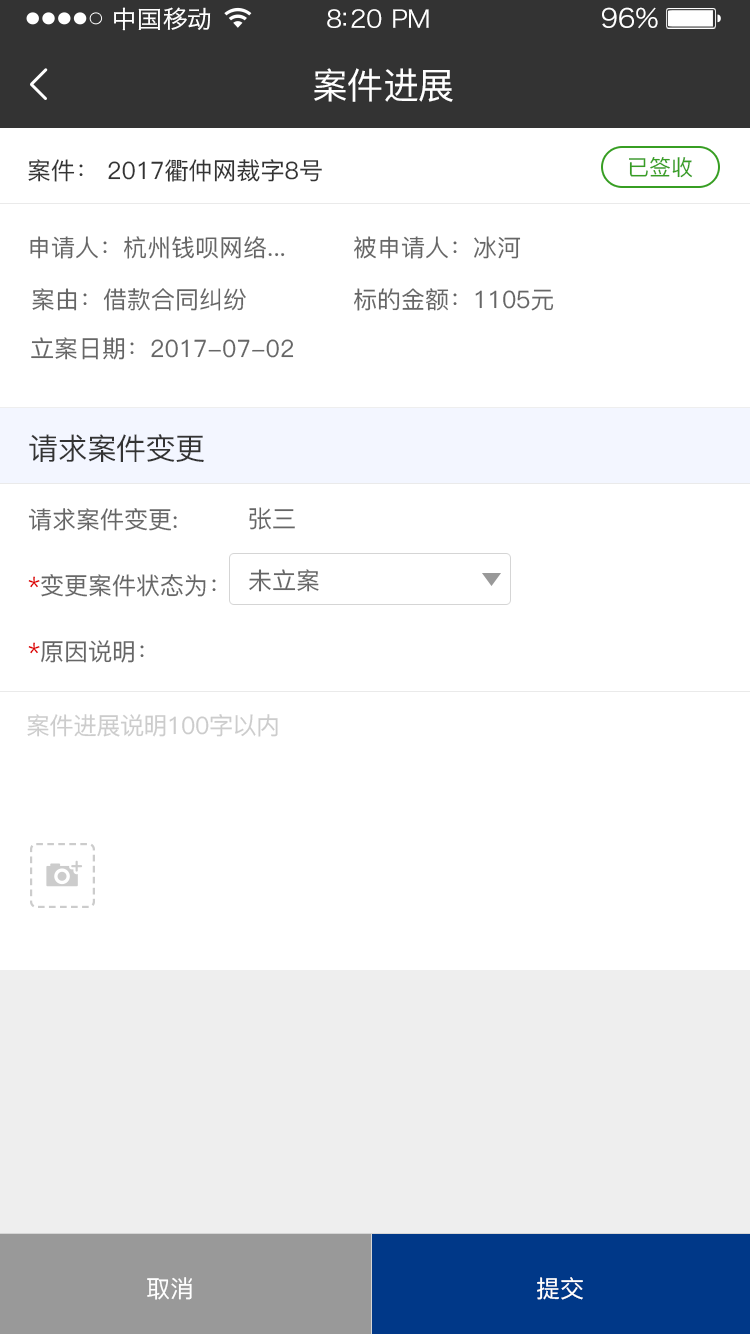
<style>
.page{position:relative;width:750px;height:1334px;background:#ffffff}
.page>*{position:absolute;margin:0}
.t1{font:24px "HiraginoSansGB-W3";letter-spacing:0.02em;color:#ffffff;scale:1.03 1}
.t2{font:24px "HiraginoSansGB-W3";letter-spacing:-0.02em;color:#ffffff;scale:1.03 1}
.t3{font:26.2px "HiraginoSansGB-W3";letter-spacing:-0.02em;color:#ffffff;scale:1.03 1}
.t4{font:36px "PingFang-SC-Medium";letter-spacing:-0.02em;color:#ffffff}
.t5{font:24px "PingFang-SC-Medium";color:#333333}
.t6{font:22px "PingFang-SC-Medium";color:#379e23}
.t7{font:24px "PingFang-SC-Medium";color:#666666}
.t8{font:30px "PingFang-SC-Medium";letter-spacing:-0.02em;color:#333333}
.t9{font:24px/66px "PingFang-SC-Medium";color:#666666}
.t10{font:24px/66px "PingFang-SC-Medium";color:#de0101}
.t11{font:24px "PingFang-SC-Medium";letter-spacing:-0.02em;color:#cccccc}
.t12{font:24px "PingFang-SC-Medium";color:#ffffff}
</style>
<div class="page">
<p class="t1" style="left:114px;top:7px;width:97px;height:24px">中国移动</p>
<p class="t2" style="left:327px;top:9px;width:102px;height:19px">8:20 PM</p>
<p class="t3" style="left:602px;top:7px;width:56px;height:22px">96%</p>
<p class="t4" style="left:314px;top:68px;width:139px;height:34px">案件进展</p>
<p class="t5" style="left:28px;top:159px;width:294px;height:23px">案件： 2017衢仲网裁字8号</p>
<p class="t6" style="left:629px;top:157px;width:64px;height:21px">已签收</p>
<p class="t7" style="left:30px;top:236px;width:255px;height:23px">申请人：杭州钱呗网络...</p>
<p class="t7" style="left:354px;top:236px;width:167px;height:23px">被申请人：冰河</p>
<p class="t7" style="left:32px;top:288px;width:214px;height:23px">案由：借款合同纠纷</p>
<p class="t7" style="left:354px;top:288px;width:200px;height:23px">标的金额：1105元</p>
<p class="t7" style="left:31px;top:337px;width:263px;height:23px">立案日期：2017-07-02</p>
<p class="t8" style="left:29px;top:434px;width:175px;height:28px">请求案件变更</p>
<p class="t9" style="left:28px;top:508px;width:188px;height:155px">请求案件变更:<br><span class="t10">*</span>变更案件状态为：<br><span class="t10">*</span>原因说明：</p>
<p class="t7" style="left:249px;top:507px;width:46px;height:23px">张三</p>
<p class="t7" style="left:249px;top:569px;width:70px;height:23px">未立案</p>
<p class="t11" style="left:27px;top:714px;width:251px;height:23px">案件进展说明100字以内</p>
<p class="t12" style="left:147px;top:1277px;width:45px;height:23px">取消</p>
<p class="t12" style="left:537px;top:1277px;width:46px;height:23px">提交</p>
</div>
